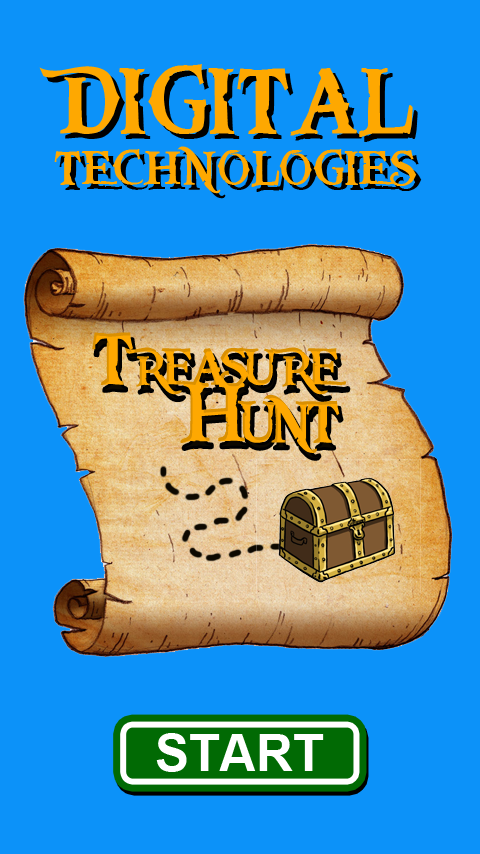
<style>
.page{position:relative;width:480px;height:854px;background:#0c92f9}
.page>*{position:absolute;margin:0}
.t1{font:50.8px/50.1px "PiecesofEight";color:#fea801;font-variant:small-caps}
.t2{font:99px "PiecesofEight";color:#fea801;font-variant:small-caps}
.t3{font:50.8px/50.1px "PiecesofEight";font-variant:small-caps}
.t4{font:99px "PiecesofEight";font-variant:small-caps}
.t5{font:78.4px/57.8px "PiecesofEight";letter-spacing:-0.12em;color:#fea801;font-variant:small-caps}
.t6{font:89.6px/57.8px "PiecesofEight";letter-spacing:-0.12em;color:#fea801;font-variant:small-caps}
.t7{font:78.4px/57.8px "PiecesofEight";letter-spacing:-0.12em;font-variant:small-caps}
.t8{font:89.6px/57.8px "PiecesofEight";letter-spacing:-0.12em;font-variant:small-caps}
.t9{font:50.7px "Arial-BoldMT";color:#ffffff;font-variant:small-caps}
</style>
<div class="page">
<p class="t1" style="left:39px;top:64px;width:378px;height:130px;text-align:center"><span class="t2">DIGITAL<br></span>TECHNOLOGIES</p>
<p class="t3" style="left:44px;top:69px;width:378px;height:130px;text-align:center"><span class="t4">DIGITAL<br></span>TECHNOLOGIES</p>
<p class="t5" style="left:92px;top:332px;width:254px;height:121px;text-align:right">Treasure<br><span class="t6">Hunt</span></p>
<p class="t7" style="left:95px;top:338px;width:254px;height:122px;text-align:right">Treasure<br><span class="t8">Hunt</span></p>
<p class="t9" style="left:156px;top:733px;width:168px;height:39px">START</p>
</div>
